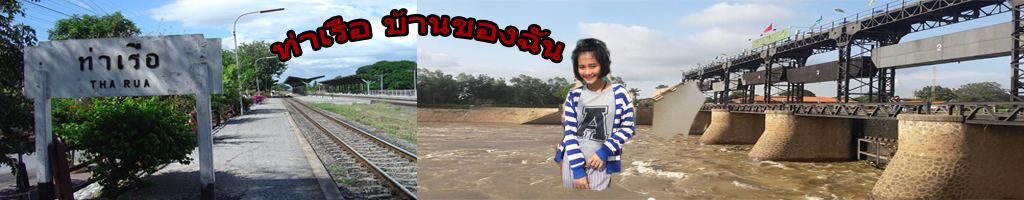
<style>
.page{position:relative;width:1024px;height:200px}
.page>*{position:absolute;margin:0}
.t1{font:30px "Tahoma";color:#a40000}
</style>
<div class="page">
<p class="t1" style="left:272px;top:11px;width:291px;height:50px">ท่าเรือ บ้านของฉัน</p>
</div>
